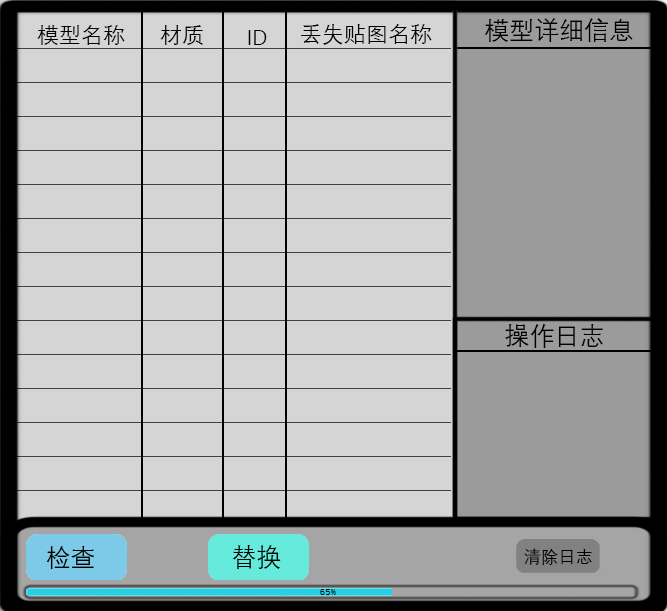
<style>
.page{position:relative;width:667px;height:611px;background:#d5d5d5}
.page>*{position:absolute;margin:0}
.t1{font:22.1px "DengXian";color:#000000}
.t2{font:25px "DengXian";color:#000000}
.t3{font:17.3px "DengXian";color:#000000}
.t4{font:10.3px "DengXian";color:#000000}
</style>
<div class="page">
<p class="t1" style="left:37px;top:25px;width:88px;height:20px">模型名称</p>
<p class="t1" style="left:160px;top:25px;width:43px;height:20px">材质</p>
<p class="t1" style="left:248px;top:30px;width:19px;height:15px">ID</p>
<p class="t1" style="left:301px;top:24px;width:131px;height:21px">丢失贴图名称</p>
<p class="t2" style="left:484px;top:18px;width:149px;height:24px">模型详细信息</p>
<p class="t2" style="left:505px;top:324px;width:98px;height:24px">操作日志</p>
<p class="t2" style="left:232px;top:545px;width:49px;height:24px">替换</p>
<p class="t2" style="left:46px;top:546px;width:49px;height:23px">检查</p>
<p class="t3" style="left:524px;top:548px;width:68px;height:17px">清除日志</p>
<p class="t4" style="left:320px;top:589px;width:16px;height:6px">65%</p>
</div>
